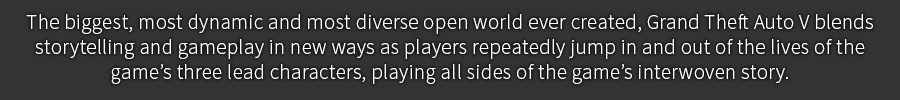
<style>
.page{position:relative;width:900px;height:100px;background:#333333}
.page>*{position:absolute;margin:0}
.t1{font:20.8px "SourceSansPro-Light";letter-spacing:0.02em;color:#ffffff}
</style>
<div class="page">
<p class="t1" style="left:26px;top:14px;width:847px;height:70px;text-align:center">The biggest, most dynamic and most diverse open world ever created, Grand Theft Auto V blends storytelling and gameplay in new ways as players repeatedly jump in and out of the lives of the game’s three lead characters, playing all sides of the game’s interwoven story.</p>
</div>
